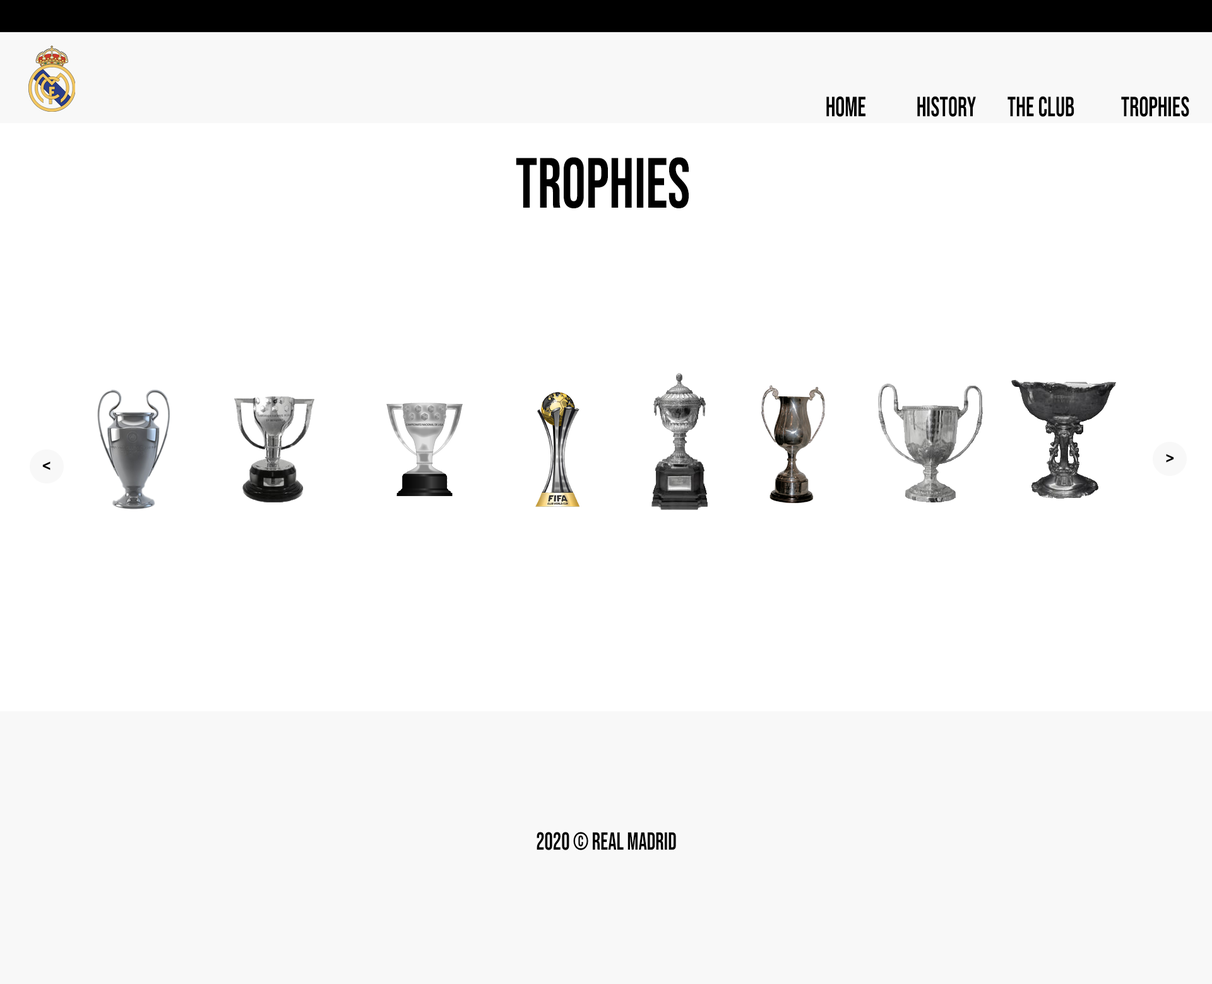
<style>
.page{position:relative;width:1212px;height:984px;background:#ffffff}
.page>*{position:absolute;margin:0}
.t1{font:27.9px "BebasNeue-Regular";color:#000000;scale:0.85 1}
.t2{font:71px "BebasNeue-Regular";color:#000000;scale:0.85 1}
.t3{font:24.8px "BebasNeue-Regular";color:#000000}
.t4{font:24.8px "BebasNeue-Regular";color:#000000;scale:0.85 1}
</style>
<div class="page">
<p class="t1" style="left:826px;top:96px;width:363px;height:21px">Home   History  The club   Trophies</p>
<p class="t2" style="left:516px;top:157px;width:173px;height:51px">Trophies</p>
<p class="t3" style="left:42px;top:461px;width:8px;height:9px">&lt;</p>
<p class="t4" style="left:536px;top:832px;width:140px;height:18px">2020 © Real Madrid</p>
</div>
